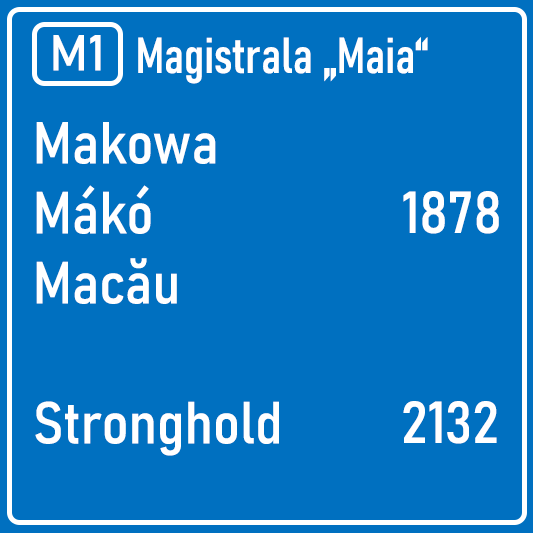
<style>
.page{position:relative;width:533px;height:533px;background:#0070c0}
.page>*{position:absolute;margin:0}
.t1{font:50px "Bahnschrift";color:#ffffff}
.t2{font:50px "Bahnschrift-Condensed";color:#ffffff}
.t3{font:58.3px "Bahnschrift-SemiCondensed";color:#ffffff}
</style>
<div class="page">
<p class="t1" style="left:53px;top:35px;width:48px;height:36px">M1</p>
<p class="t2" style="left:138px;top:37px;width:290px;height:47px">Magistrala „Maia“</p>
<p class="t3" style="left:35px;top:122px;width:244px;height:334px">Makowa<br>Mákó<br>Macău<br><br>Stronghold</p>
<p class="t3" style="left:403px;top:191px;width:96px;height:43px">1878</p>
<p class="t3" style="left:403px;top:401px;width:94px;height:43px">2132</p>
</div>
